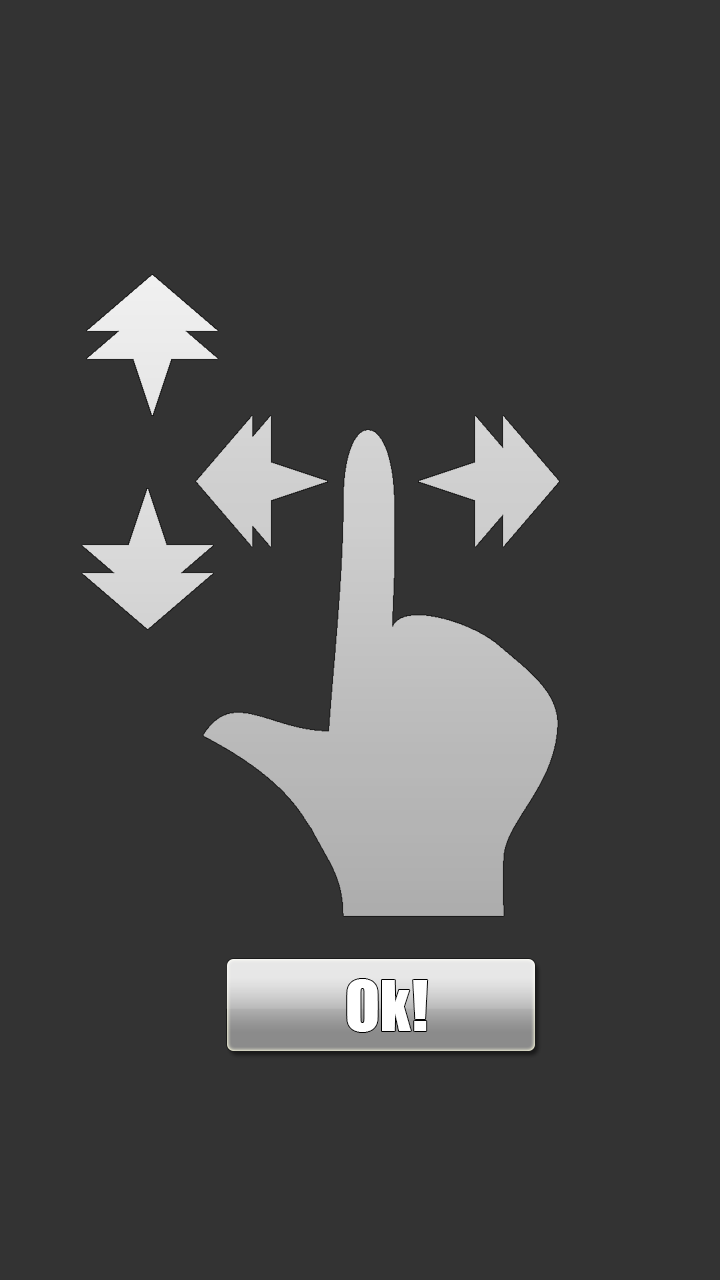
<style>
.page{position:relative;width:720px;height:1280px;background:#333333}
.page>*{position:absolute;margin:0}
.t1{font:64px "Impact";color:#ffffff}
</style>
<div class="page">
<p class="t1" style="left:347px;top:979px;width:81px;height:53px">Ok!</p>
</div>
